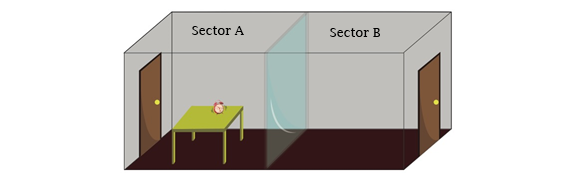
<style>
.page{position:relative;width:576px;height:182px;background:#ffffff}
.page>*{position:absolute;margin:0}
.t1{font:12.5px "LucidaFax";color:#000000}
</style>
<div class="page">
<p class="t1" style="left:192px;top:26px;width:52px;height:9px">Sector A</p>
<p class="t1" style="left:330px;top:28px;width:50px;height:9px">Sector B</p>
</div>
